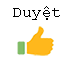
<style>
.page{position:relative;width:71px;height:58px;background:#ffffff}
.page>*{position:absolute;margin:0}
.t1{font:12px "CourierNewPSMT";color:#000000}
</style>
<div class="page">
<p class="t1" style="left:13px;top:6px;width:47px;height:14px">Duyệt</p>
</div>
